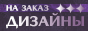
<style>
.page{position:relative;width:88px;height:31px}
.page>*{position:absolute;margin:0}
.t1{font:8px "ArticaPro-Black"}
.t2{font:14px "ArticaPro-Black"}
</style>
<div class="page">
<p class="t1" style="left:6px;top:5px;width:43px;height:6px">НА ЗАКАЗ</p>
<p class="t2" style="left:6px;top:12px;width:79px;height:17px">ДИЗАЙНЫ</p>
</div>
